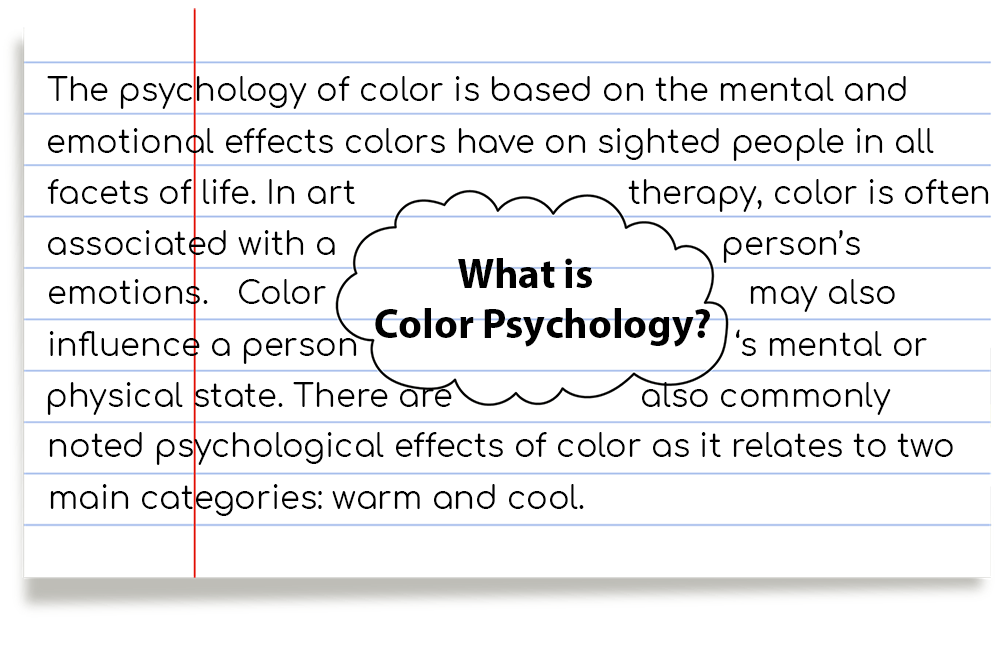
<style>
.page{position:relative;width:1000px;height:651px;background:#ffffff}
.page>*{position:absolute;margin:0}
.t1{font:32.1px "Comfortaa-Regular";color:#000000}
.t2{font:41.7px "MyriadPro-Bold";color:#000000}
</style>
<div class="page">
<p class="t1" style="left:47px;top:76px;width:859px;height:33px">The psychology of color is based on the mental and</p>
<p class="t1" style="left:48px;top:128px;width:886px;height:33px">emotional effects colors have on sighted people in all</p>
<p class="t1" style="left:47px;top:179px;width:942px;height:33px">facets of life. In art                             therapy, color is often</p>
<p class="t1" style="left:48px;top:230px;width:812px;height:33px">associated with a                                         person’s</p>
<p class="t2" style="left:375px;top:258px;width:335px;height:89px">What is <br> Color Psychology?</p>
<p class="t1" style="left:49px;top:279px;width:846px;height:33px">emotions.   Color                                             may also</p>
<p class="t1" style="left:49px;top:329px;width:878px;height:35px">influence a person                                        ‘s mental or</p>
<p class="t1" style="left:47px;top:382px;width:844px;height:33px">physical state. There are                    also commonly</p>
<p class="t1" style="left:49px;top:432px;width:904px;height:33px">noted psychological effects of color as it relates to two</p>
<p class="t1" style="left:50px;top:484px;width:534px;height:32px">main categories: warm and cool.</p>
</div>
